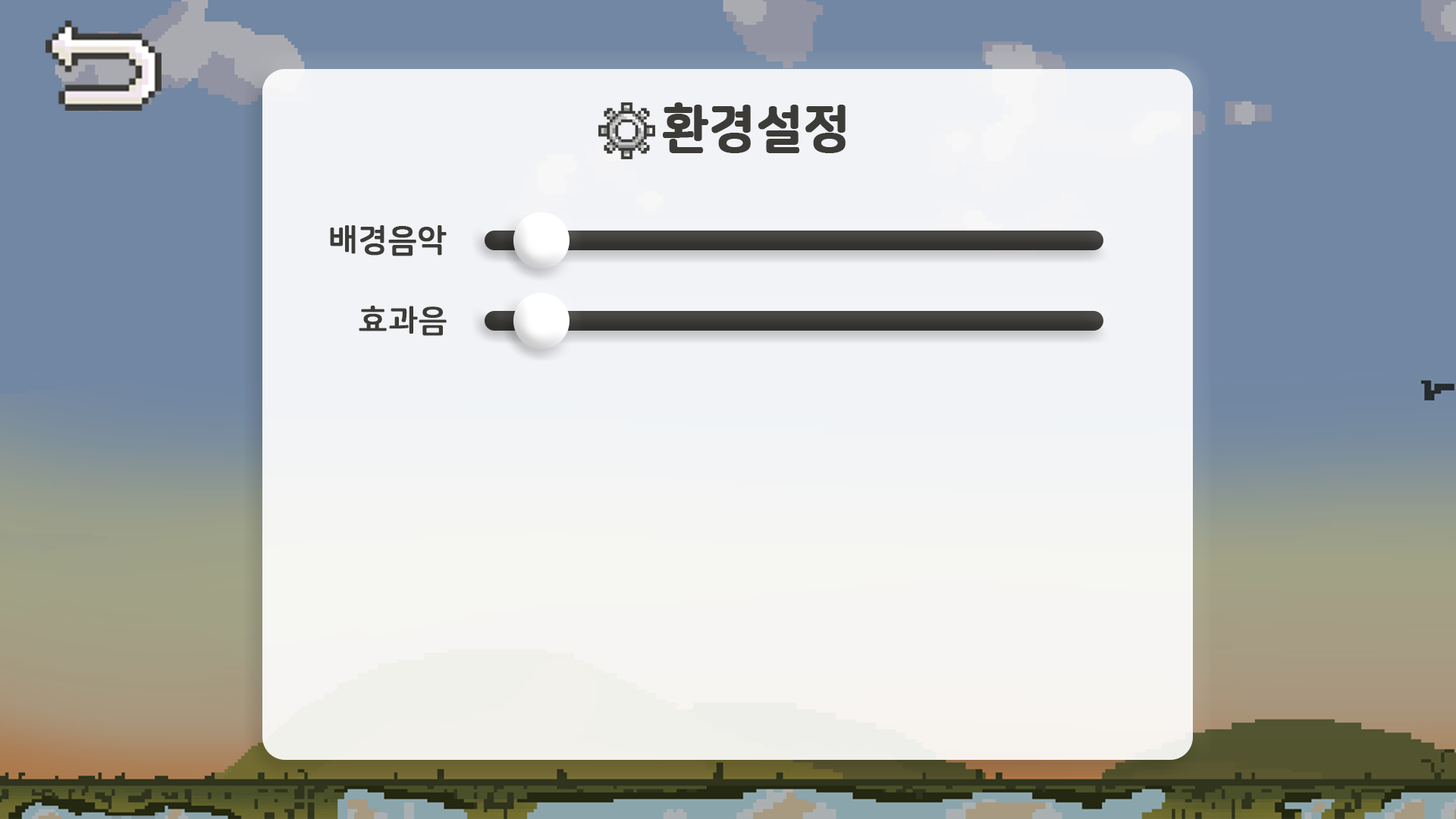
<style>
.page{position:relative;width:1456px;height:819px}
.page>*{position:absolute;margin:0}
.t1{font:50.6px "NanumSquareRoundEB";color:#3c3b38;font-weight:bold}
.t2{font:31.6px "NanumSquareRoundB";color:#3c3b38;font-weight:bold}
</style>
<div class="page">
<p class="t1" style="left:663px;top:102px;width:183px;height:51px">환경설정</p>
<p class="t2" style="left:330px;top:225px;width:117px;height:31px">배경음악</p>
<p class="t2" style="left:359px;top:306px;width:88px;height:30px">효과음</p>
</div>
